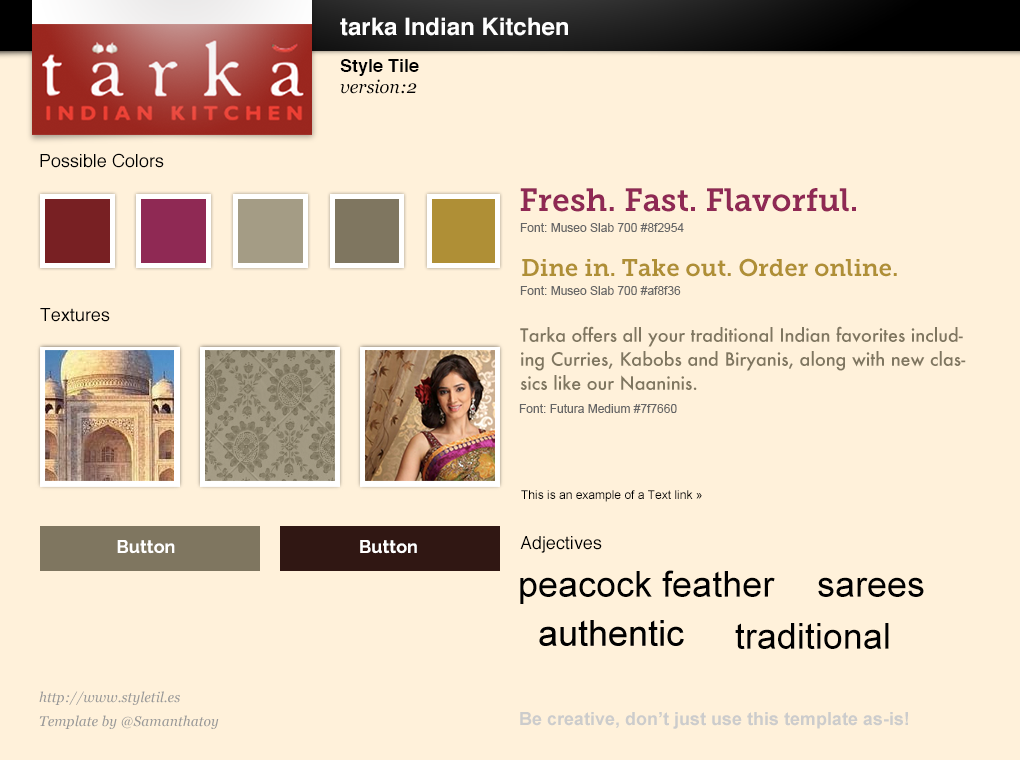
<style>
.page{position:relative;width:1020px;height:760px;background:#fff1da}
.page>*{position:absolute;margin:0}
.t1{font:24px "Helvetica-Bold";color:#ffffff}
.t2{font:18px "Helvetica-Bold";color:#000000}
.t3{font:18px "Georgia-Italic";color:#000000}
.t4{font:18px "Helvetica";color:#000000}
.t5{font:32px "MuseoSlab-700";color:#8f2954}
.t6{font:12px "ArialMT";color:#666666}
.t7{font:24px "MuseoSlab-700";color:#af8f36}
.t8{font:18px/24px "Futura-Medium";color:#7f7660}
.t9{font:12px "ArialMT";color:#000000}
.t10{font:18px "Raleway-Bold";color:#ffffff}
.t11{font:36px "ArialMT";color:#000000}
.t12{font:14px/24px "Georgia-Italic";color:#999999}
.t13{font:18px "Arial-BoldMT";color:#cccccc}
</style>
<div class="page">
<p class="t1" style="left:340px;top:17px;width:228px;height:19px">tarka Indian Kitchen</p>
<p class="t2" style="left:340px;top:59px;width:79px;height:17px">Style Tile</p>
<p class="t3" style="left:340px;top:79px;width:77px;height:15px">version:2</p>
<p class="t4" style="left:40px;top:153px;width:124px;height:15px">Possible Colors</p>
<p class="t5" style="left:520px;top:188px;width:336px;height:24px">Fresh. Fast. Flavorful.</p>
<p class="t6" style="left:520px;top:223px;width:164px;height:9px">Font: Museo Slab 700 #8f2954</p>
<p class="t7" style="left:522px;top:258px;width:375px;height:19px">Dine in. Take out. Order online.</p>
<p class="t6" style="left:520px;top:286px;width:161px;height:9px">Font: Museo Slab 700 #af8f36</p>
<p class="t4" style="left:40px;top:308px;width:70px;height:14px">Textures</p>
<p class="t8" style="left:520px;top:326px;width:446px;height:65px">Tarka offers all your traditional Indian favorites including Curries, Kabobs and Biryanis, along with new classics like our Naaninis.</p>
<p class="t6" style="left:519px;top:404px;width:158px;height:9px">Font: Futura Medium #7f7660</p>
<p class="t9" style="left:521px;top:490px;width:181px;height:12px">This is an example of a Text link »</p>
<p class="t10" style="left:117px;top:540px;width:58px;height:14px">Button</p>
<p class="t10" style="left:360px;top:540px;width:57px;height:14px">Button</p>
<p class="t4" style="left:520px;top:536px;width:82px;height:17px">Adjectives</p>
<p class="t11" style="left:520px;top:570px;width:255px;height:34px">peacock feather</p>
<p class="t11" style="left:818px;top:577px;width:106px;height:20px">sarees</p>
<p class="t11" style="left:735px;top:623px;width:154px;height:26px">traditional</p>
<p class="t12" style="left:39px;top:691px;width:180px;height:38px">http://www.styletil.es<br>Template by @Samanthatoy</p>
<p class="t13" style="left:520px;top:712px;width:388px;height:17px">Be creative, don’t just use this template as-is!</p>
</div>
